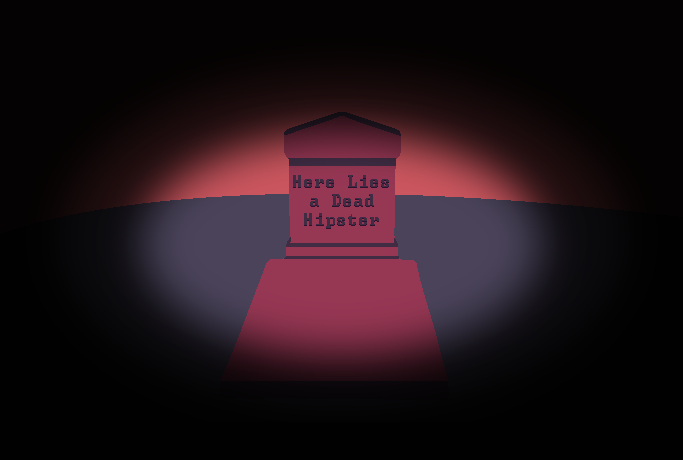
<style>
.page{position:relative;width:683px;height:460px}
.page>*{position:absolute;margin:0}
.t1{font:16px "GreenScreen";color:#402d44}
</style>
<div class="page">
<p class="t1" style="left:293px;top:175px;width:96px;height:53px;text-align:center">Here Lies<br>a Dead<br>Hipster</p>
</div>
